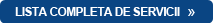
<style>
.page{position:relative;width:213px;height:23px;background:#0a4583}
.page>*{position:absolute;margin:0}
.t1{font:12px "Arial-BoldMT";letter-spacing:-0.05em;color:#ffffff}
.t2{font:16px "ArialMT";color:#fefeff}
</style>
<div class="page">
<p class="t1" style="left:15px;top:7px;width:165px;height:9px">LISTA COMPLETA DE SERVICII</p>
<p class="t2" style="left:188px;top:9px;width:7px;height:7px">»</p>
</div>
